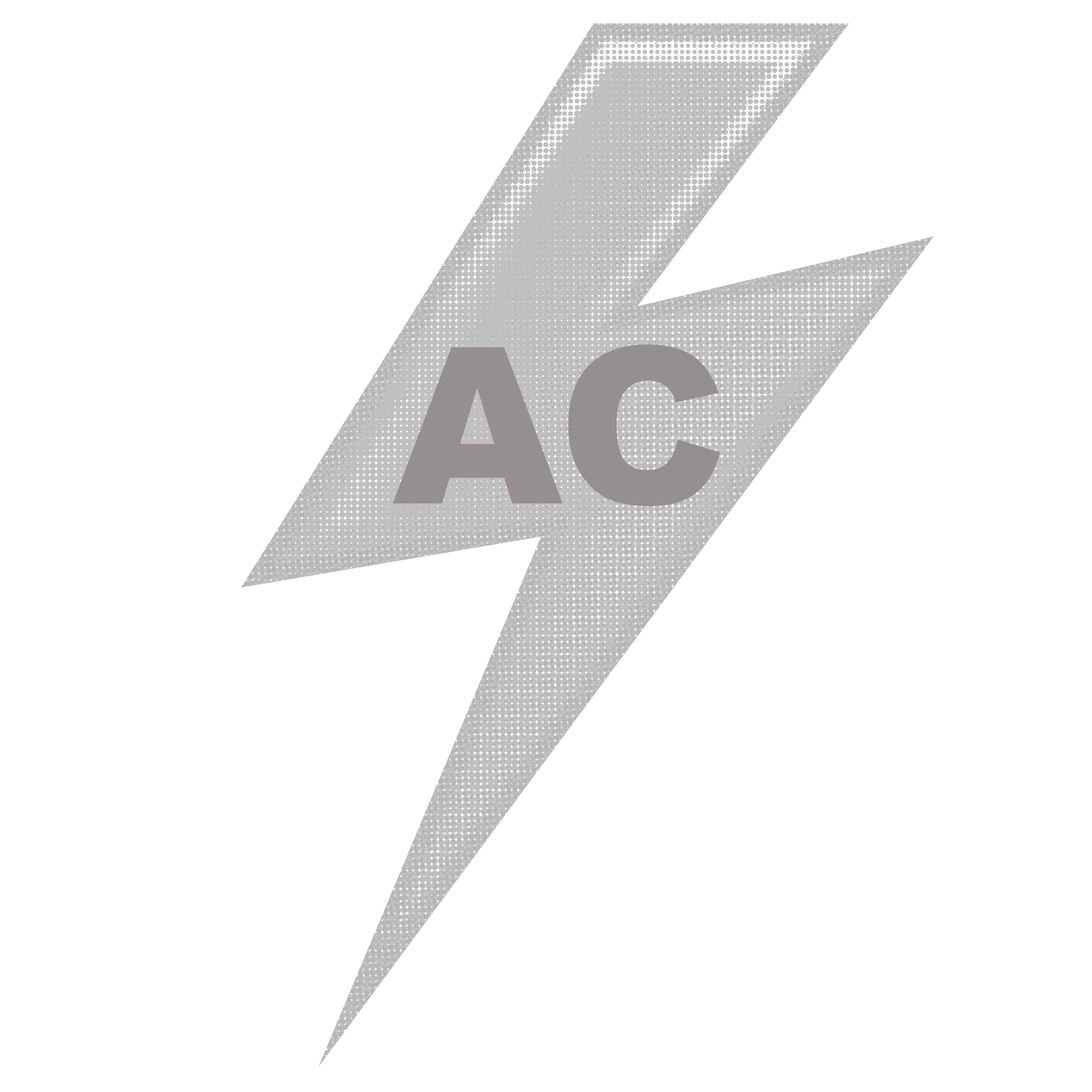
<style>
.page{position:relative;width:1092px;height:1092px;background:#ffffff}
.page>*{position:absolute;margin:0}
.t1{font:217.7px "Arial-Black";color:#958f8f}
</style>
<div class="page">
<p class="t1" style="left:393px;top:345px;width:327px;height:161px">AC</p>
</div>
